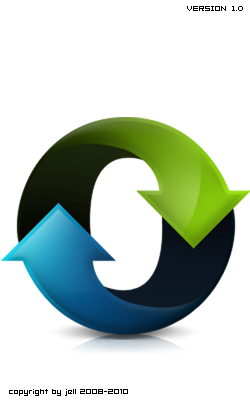
<style>
.page{position:relative;width:250px;height:400px;background:#ffffff}
.page>*{position:absolute;margin:0}
.t1{font:6px "04b08";color:#000000}
.t2{font:8px "Hooge0553";color:#000000}
</style>
<div class="page">
<p class="t1" style="left:187px;top:6px;width:56px;height:5px">version 1.0</p>
<p class="t2" style="left:9px;top:389px;width:119px;height:7px">copyright by jell 2008-2010</p>
</div>
